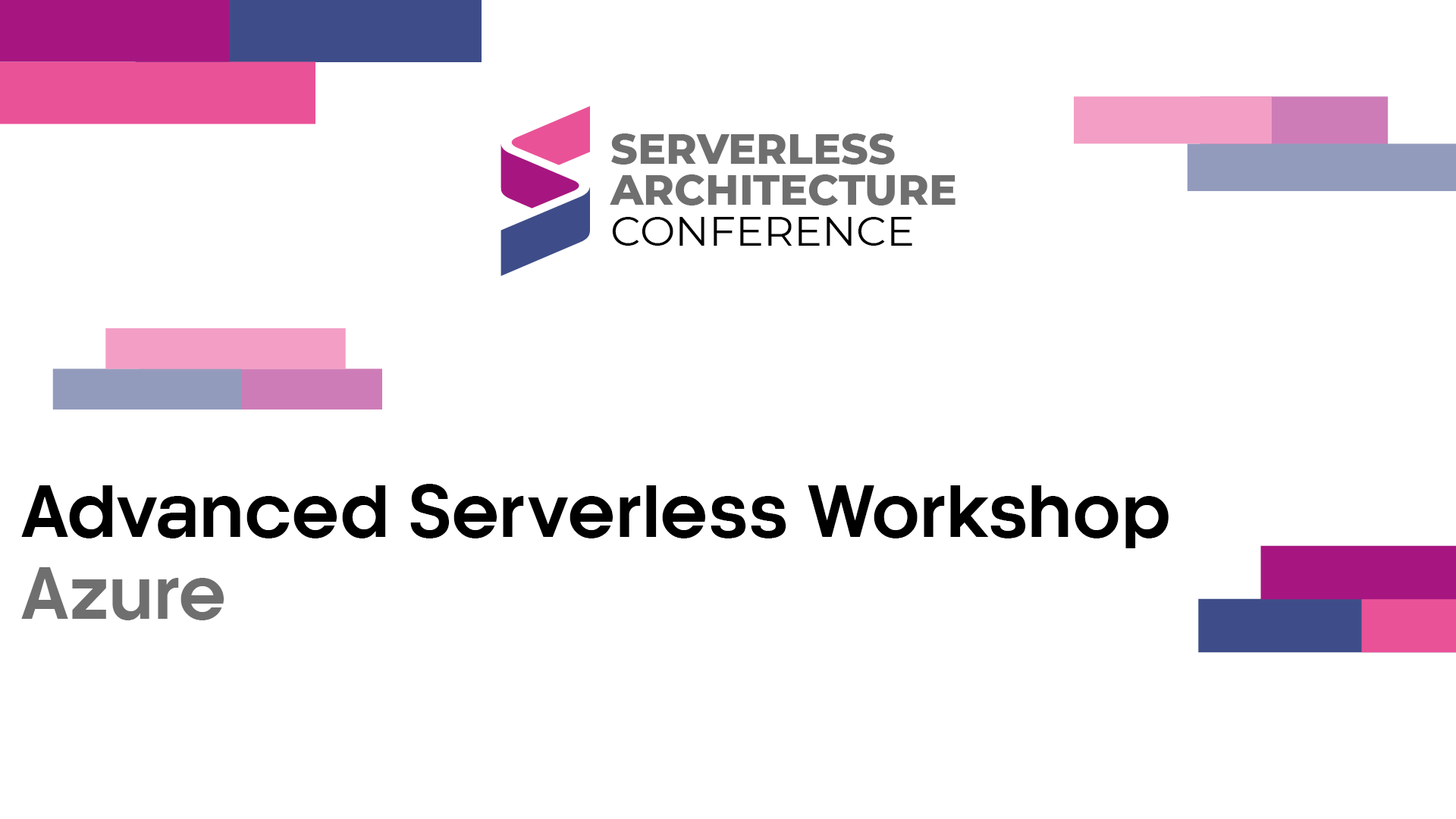
<style>
.page{position:relative;width:1456px;height:819px;background:#ffffff}
.page>*{position:absolute;margin:0}
.t1{font:68.2px "Kamerik205-Regular3";color:#000000}
.t2{font:68.2px "Kamerik205-Regular3";color:#706f6f}
</style>
<div class="page">
<p class="t1" style="left:21px;top:484px;width:1148px;height:64px">Advanced Serverless Workshop</p>
<p class="t2" style="left:21px;top:567px;width:203px;height:53px">Azure</p>
</div>
